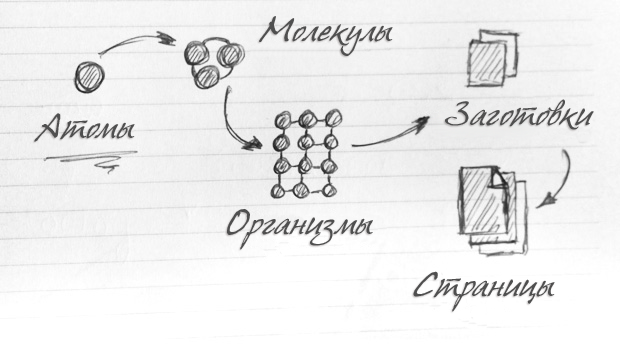
<style>
.page{position:relative;width:620px;height:349px}
.page>*{position:absolute;margin:0}
.t1{font:30px "HansHand-_cyr";color:#4f4f4f}
</style>
<div class="page">
<p class="t1" style="left:259px;top:16px;width:134px;height:40px">Молекулы</p>
<p class="t1" style="left:445px;top:99px;width:149px;height:31px">Заготовки</p>
<p class="t1" style="left:34px;top:113px;width:101px;height:29px">Атомы</p>
<p class="t1" style="left:227px;top:209px;width:146px;height:41px">Организмы</p>
<p class="t1" style="left:413px;top:271px;width:142px;height:41px">Страницы</p>
</div>
